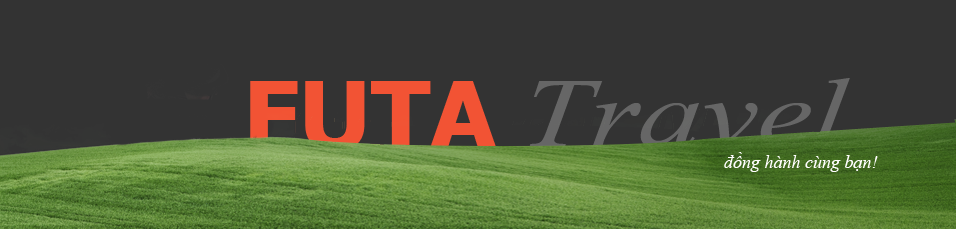
<style>
.page{position:relative;width:956px;height:229px;background:#333333}
.page>*{position:absolute;margin:0}
.t1{font:96.9px "TimesNewRomanPS-ItalicMT";color:#666666;scale:1.29 1}
.t2{font:93.6px "Tahoma-Bold";color:#f25334;scale:1.04 1}
.t3{font:18px "TimesNewRomanPS-ItalicMT";color:#fffefe}
</style>
<div class="page">
<p class="t1" style="left:529px;top:78px;width:321px;height:69px">Travel</p>
<p class="t2" style="left:250px;top:81px;width:247px;height:70px">FUTA</p>
<p class="t3" style="left:724px;top:152px;width:154px;height:20px">đồng hành cùng bạn!</p>
</div>
